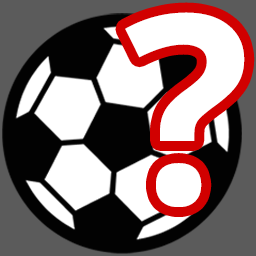
<style>
.page{position:relative;width:256px;height:256px;background:#ffffff}
.page>*{position:absolute;margin:0}
.t1{font:263.4px "OpenSans-Bold";color:#ffffff;text-transform:uppercase}
</style>
<div class="page">
<p class="t1" style="left:125px;top:12px;width:120px;height:195px">?</p>
</div>
